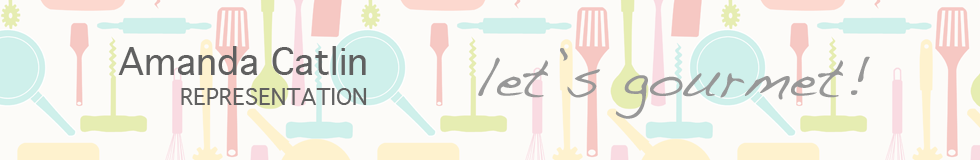
<style>
.page{position:relative;width:980px;height:160px;background:#fcfbf8}
.page>*{position:absolute;margin:0}
.t1{font:36px "Geneva";color:#606060}
.t2{font:55px "Handwriting-Dakota";color:#979797}
.t3{font:22px "Geneva";color:#606060}
</style>
<div class="page">
<p class="t1" style="left:118px;top:46px;width:248px;height:29px">Amanda Catlin</p>
<p class="t2" style="left:478px;top:48px;width:392px;height:71px">let’s gourmet!</p>
<p class="t3" style="left:181px;top:88px;width:186px;height:17px">REPRESENTATION</p>
</div>
